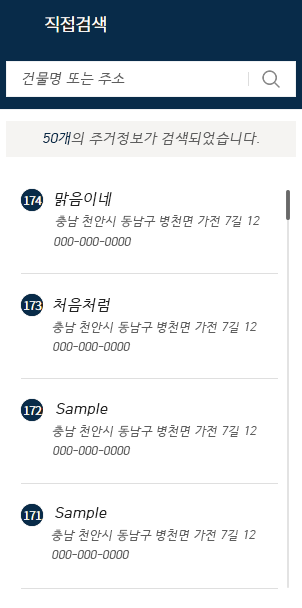
<style>
.page{position:relative;width:302px;height:608px;background:#ffffff}
.page>*{position:absolute;margin:0}
.t1{font:14px "HCRDotum";color:#5e5e5e;font-style:italic}
.t2{font:14px "HCRDotum";color:#082b49;font-style:italic}
.t3{font:15px "HCRDotum";color:#222222;font-style:italic}
.t4{font:12px "HCRDotum";color:#5e5e5e;font-style:italic}
</style>
<div class="page">
<p class="t1" style="left:22px;top:72px;width:103px;height:14px">건물명 또는 주소</p>
<p class="t1" style="left:43px;top:132px;width:216px;height:13px"><span class="t2">50개</span>의 주거정보가 검색되었습니다.</p>
<p class="t3" style="left:55px;top:192px;width:57px;height:14px">맑음이네</p>
<p class="t4" style="left:55px;top:215px;width:205px;height:13px">충남 천안시 동남구 병천면 가전 7길 12</p>
<p class="t4" style="left:54px;top:237px;width:78px;height:9px">000-000-0000</p>
<p class="t3" style="left:53px;top:298px;width:57px;height:14px">처음처럼</p>
<p class="t4" style="left:52px;top:321px;width:205px;height:13px">충남 천안시 동남구 병천면 가전 7길 12</p>
<p class="t4" style="left:53px;top:342px;width:78px;height:9px">000-000-0000</p>
<p class="t3" style="left:56px;top:403px;width:52px;height:13px">Sample</p>
<p class="t4" style="left:52px;top:425px;width:205px;height:13px">충남 천안시 동남구 병천면 가전 7길 12</p>
<p class="t4" style="left:53px;top:446px;width:78px;height:9px">000-000-0000</p>
<p class="t3" style="left:55px;top:507px;width:52px;height:13px">Sample</p>
<p class="t4" style="left:51px;top:529px;width:205px;height:13px">충남 천안시 동남구 병천면 가전 7길 12</p>
<p class="t4" style="left:52px;top:550px;width:78px;height:9px">000-000-0000</p>
</div>
